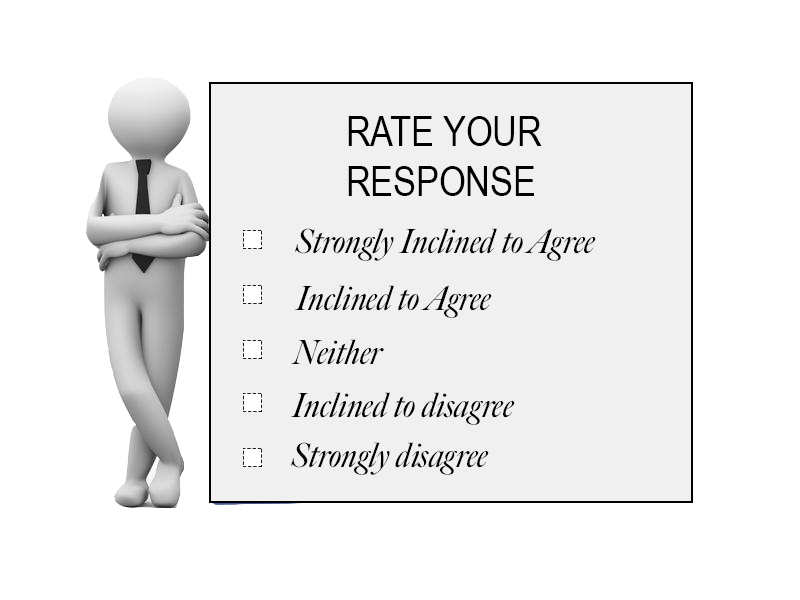
<style>
.page{position:relative;width:800px;height:600px;background:#ffffff}
.page>*{position:absolute;margin:0}
.t1{font:41.7px "ArialNarrow";color:#000000}
.t2{font:33.3px "BigCaslonFB-Italic";color:#000000}
</style>
<div class="page">
<p class="t1" style="left:348px;top:116px;width:194px;height:80px">RATE YOUR <br>RESPONSE</p>
<p class="t2" style="left:295px;top:228px;width:301px;height:33px">Strongly Inclined to Agree</p>
<p class="t2" style="left:294px;top:285px;width:198px;height:33px">Inclined to Agree</p>
<p class="t2" style="left:291px;top:339px;width:93px;height:26px">Neither</p>
<p class="t2" style="left:290px;top:392px;width:225px;height:33px">Inclined to disagree</p>
<p class="t2" style="left:291px;top:442px;width:198px;height:33px">Strongly disagree</p>
</div>
